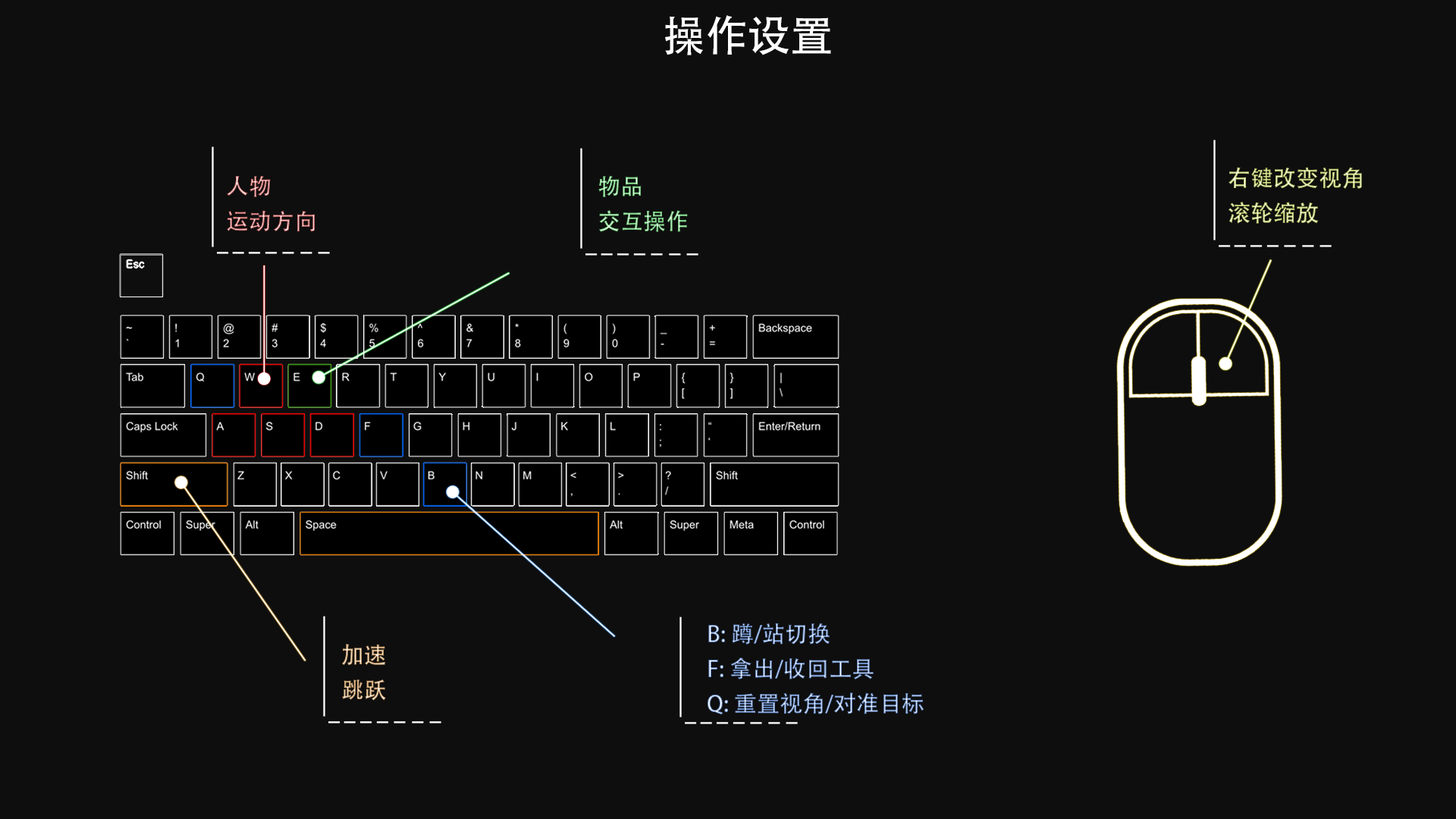
<style>
.page{position:relative;width:1456px;height:819px;background:#0e0e0e}
.page>*{position:absolute;margin:0}
.t1{font:42.5px "AdobeHeitiStd-Regular";color:#ffffff}
.t2{font:22.7px "AdobeHeitiStd-Regular"}
</style>
<div class="page">
<p class="t1" style="left:665px;top:15px;width:166px;height:40px">操作设置</p>
<p class="t2" style="left:1228px;top:167px;width:134px;height:57px">右键改变视角<br>滚轮缩放</p>
<p class="t2" style="left:227px;top:175px;width:88px;height:57px">人物<br>运动方向</p>
<p class="t2" style="left:598px;top:175px;width:90px;height:57px">物品<br>交互操作</p>
<p class="t2" style="left:708px;top:623px;width:216px;height:91px">B: 蹲/站切换<br>F: 拿出/收回工具<br>Q: 重置视角/对准目标</p>
<p class="t2" style="left:342px;top:644px;width:44px;height:57px">加速<br>跳跃</p>
</div>
